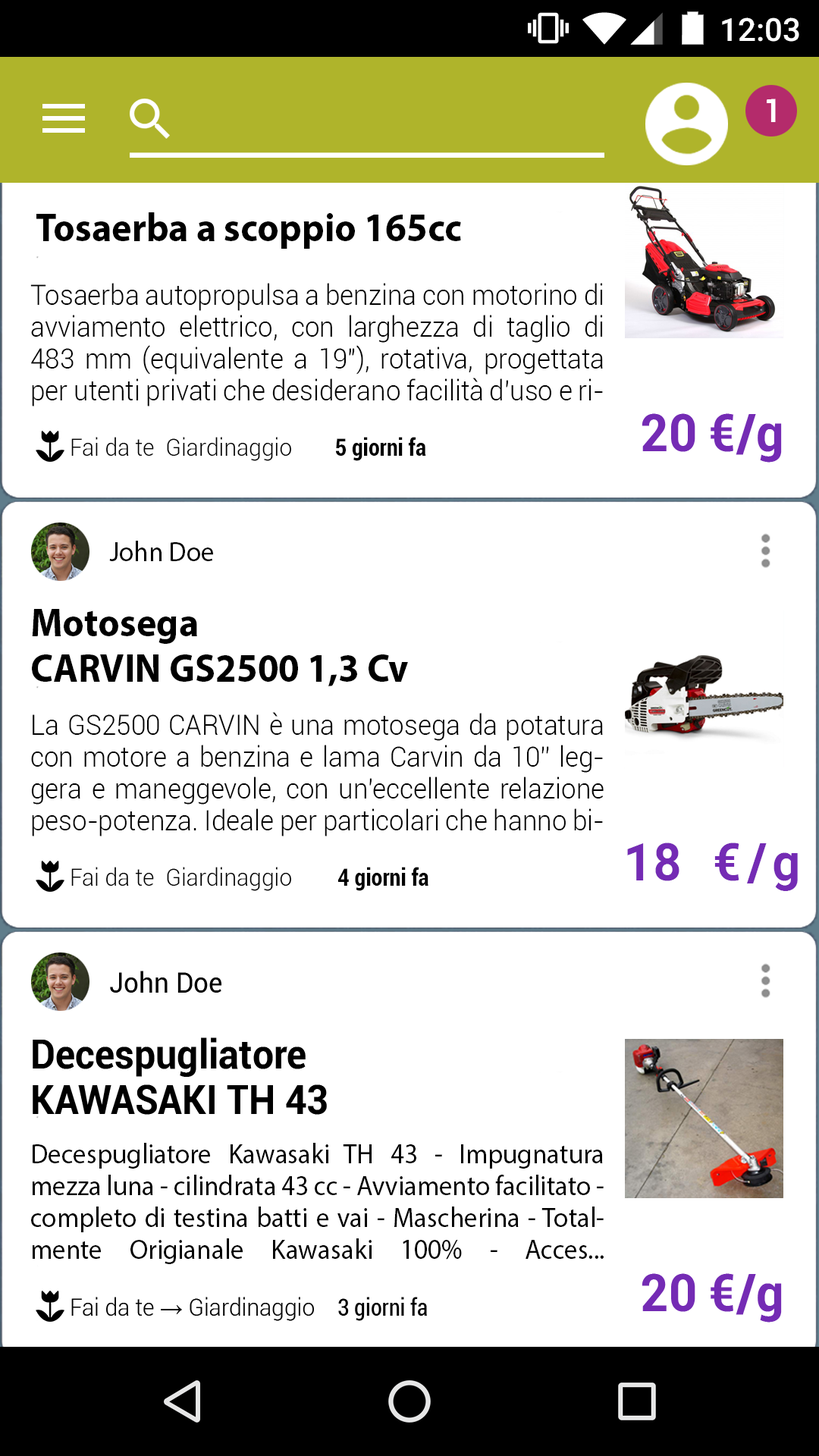
<style>
.page{position:relative;width:819px;height:1456px;background:#ffffff}
.page>*{position:absolute;margin:0}
.t1{font:32.2px "Roboto-Bold";color:#ffffff;scale:0.94 1}
.t2{font:40.2px "MyriadPro-Bold";color:#000000;scale:0.94 1}
.t3{font:28.1px "Roboto-Light";color:#000000;scale:0.94 1}
.t4{font:52.2px "Roboto-Bold";color:#742bb4;scale:0.94 1}
.t5{font:24.1px "Roboto-Light";color:#000000;scale:0.94 1}
.t6{font:24.1px "Roboto-BoldCondensed";color:#000000;scale:0.94 1}
.t7{font:28.1px "MyriadPro-Regular";color:#000000;scale:0.94 1}
.t8{font:52.2px "RobotoMono-Bold";color:#742bb4;scale:0.94 1}
.t9{font:28.1px "Roboto-Regular";color:#000000;scale:0.94 1}
.t10{font:40.2px "Roboto-Bold";color:#000000;scale:0.94 1}
.t11{font:24.1px "TimesNewRomanPSMT";color:#000000;scale:0.94 1}
.t12{font:24.1px "Roboto-Condensed";color:#000000;scale:0.94 1}
</style>
<div class="page">
<p class="t1" style="left:767px;top:99px;width:9px;height:23px">1</p>
<p class="t2" style="left:36px;top:212px;width:425px;height:37px">Tosaerba a scoppio 165cc</p>
<p class="t3" style="left:30px;top:283px;width:573px;height:123px;text-align:justify">Tosaerba autopropulsa a benzina con motorino di avviamento elettrico, con larghezza di taglio di 483 mm (equivalente a 19"), rotativa, progettata per utenti privati che desiderano facilità d'uso e risultati di falciatura professionali.</p>
<p class="t4" style="left:642px;top:413px;width:140px;height:50px">20 €/g</p>
<p class="t5" style="left:71px;top:437px;width:355px;height:24px">Fai da te <span class="t6">→</span> Giardinaggio     <span class="t6">5 </span>gi</p>
<p class="t7" style="left:109px;top:541px;width:104px;height:20px">John Doe</p>
<p class="t2" style="left:32px;top:609px;width:376px;height:77px">Motosega <br>CARVIN GS2500 1,3 Cv</p>
<p class="t3" style="left:31px;top:712px;width:573px;height:124px;text-align:justify">La GS2500 CARVIN è una motosega da potatura con motore a benzina e lama Carvin da 10” leggera e maneggevole, con un'eccellente relazione peso-potenza. Ideale per particolari che hanno bisogno di una motosega leggera ed efficace per lavori di potatura dei rami degli alberi di qualsiasi tipo.</p>
<p class="t8" style="left:627px;top:842px;width:171px;height:49px">18 €/g</p>
<p class="t5" style="left:71px;top:867px;width:357px;height:24px">Fai da te <span class="t6">→</span> Giardinaggio     <span class="t6">4 giorni fa</span></p>
<p class="t9" style="left:110px;top:971px;width:111px;height:22px">John Doe</p>
<p class="t10" style="left:33px;top:1037px;width:294px;height:78px">Decespugliatore <br>KAWASAKI TH 43</p>
<p class="t3" style="left:31px;top:1143px;width:573px;height:121px;text-align:justify">Decespugliatore Kawasaki TH 43 - Impugnatura mezza luna - cilindrata 43 cc - Avviamento facilitato - completo di testina batti e vai - Mascherina - Totalmente Origianale Kawasaki 100% - Acces...</p>
<p class="t4" style="left:642px;top:1273px;width:140px;height:50px">20 €/g</p>
<p class="t5" style="left:71px;top:1297px;width:356px;height:24px">Fai da te <span class="t11">→ </span>Giardinaggio     <span class="t12">3 giorni fa</span></p>
</div>
